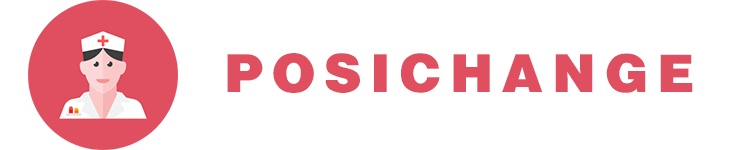
<style>
.page{position:relative;width:750px;height:150px;background:#ffffff}
.page>*{position:absolute;margin:0}
.t1{font:58.3px "Helvetica-Black-SemiBold";letter-spacing:0.15em;color:#e04f5f}
</style>
<div class="page">
<p class="t1" style="left:227px;top:53px;width:466px;height:40px">POSICHANGE</p>
</div>
